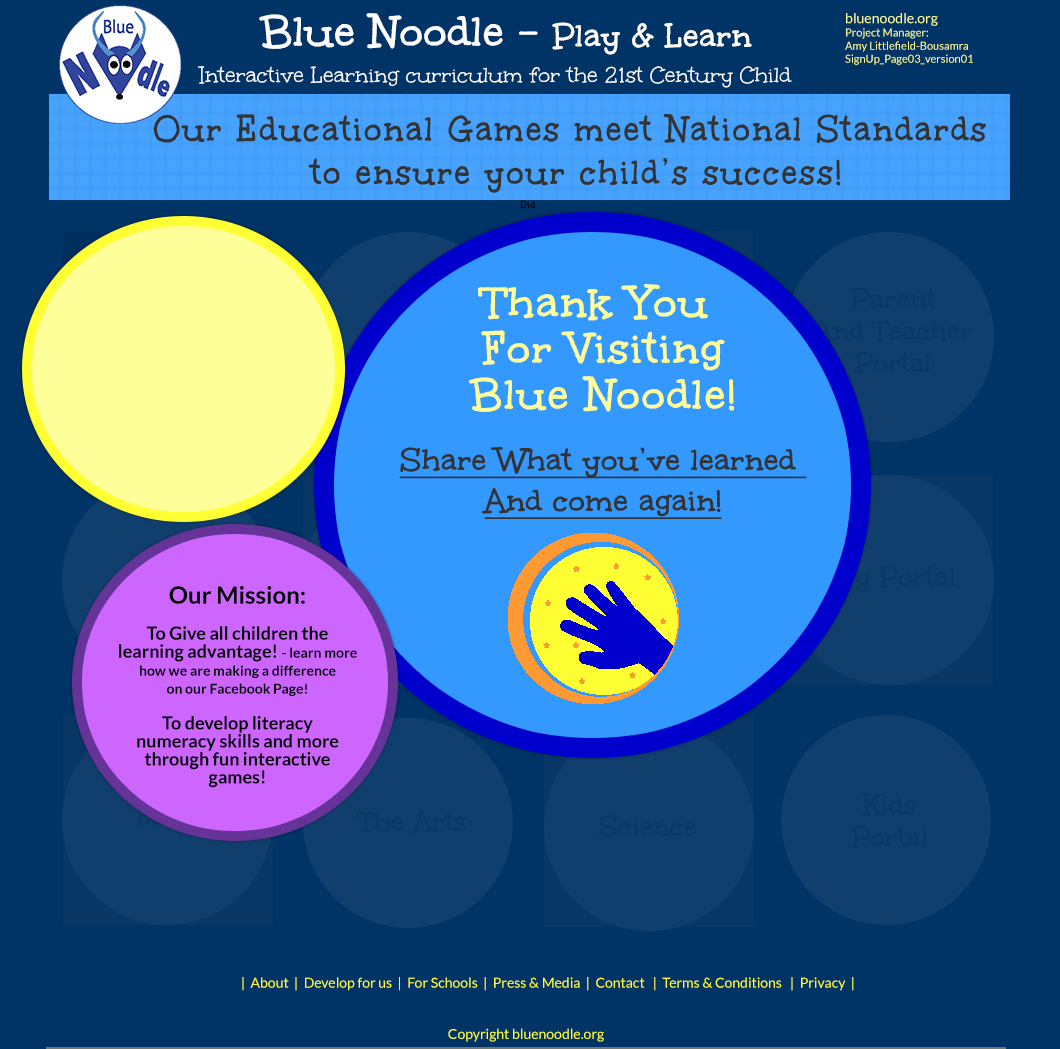
<style>
.page{position:relative;width:1060px;height:1049px;background:#003366}
.page>*{position:absolute;margin:0}
.t1{font:48px "Unkempt-Bold";color:#ffffff}
.t2{font:36px "Unkempt-Bold";color:#ffffff}
.t3{font:11px "Lato-Regular";color:#ffff99}
.t4{font:14px "Lato-Regular";color:#ffff99}
.t5{font:24px "Unkempt";color:#ffffff}
.t6{font:39.6px "Unkempt-Bold";letter-spacing:0.05em;color:#333333;scale:0.91 1}
.t7{font:11.1px "Unkempt-Bold";color:#000000}
.t8{font:48px/46px "Unkempt-Bold";letter-spacing:0.025em;color:#ffff99}
.t9{font:34px "Unkempt-Bold";color:#333333;text-decoration:underline}
.t10{font:18px/18px "Lato-Bold";color:#000000}
.t11{font:18px/20px "Lato-Bold";color:#000000}
.t12{font:24px/18px "Lato-Bold";color:#000000}
.t13{font:14px/18px "Lato-Bold";color:#000000}
.t14{font:30px/32px "Unkempt-Bold";color:#0a3968}
.t15{font:30px "Unkempt-Bold";color:#0a3968}
.t16{font:14px "Lato-Regular";color:#ffff33}
</style>
<div class="page">
<p class="t1" style="left:259px;top:13px;width:493px;height:42px">Blue Noodle - <span class="t2">Play &amp; Learn</span></p>
<p class="t3" style="left:845px;top:13px;width:128px;height:52px"><span class="t4">bluenoodle.org <br></span>Project Manager: <br>Amy Littlefield-Bousamra<br>SignUp_Page03_version01</p>
<p class="t5" style="left:198px;top:66px;width:594px;height:22px">Interactive Learning curriculum for the 21st Century Child</p>
<p class="t6" style="left:153px;top:114px;width:833px;height:79px;text-align:center">Our Educational Games meet National Standards <br>to ensure your child’s success!</p>
<p class="t7" style="left:520px;top:200px;width:16px;height:9px">Did</p>
<p class="t8" style="left:469px;top:283px;width:266px;height:129px;text-align:center">Thank You <br>For Visiting<br>Blue Noodle!</p>
<p class="t9" style="left:399px;top:446px;width:408px;height:73px;text-align:center">Share What you’ve learned <br>And come again!</p>
<p class="t10" style="left:119px;top:586px;width:238px;height:202px;text-align:center"><span class="t11"><br><br></span><span class="t12">Our Mission:<br><br></span>To Give all children the <br>learning advantage! <span class="t13">- learn more<br>how we are making a difference<br>on our Facebook Page!<br></span><br>To develop literacy  <br>numeracy skills and more <br>through fun interactive<br>games!</p>
<p class="t14" style="left:851px;top:793px;width:76px;height:56px;text-align:center">Kids<br>Portal</p>
<p class="t15" style="left:356px;top:810px;width:111px;height:23px">The Arts</p>
<p class="t15" style="left:599px;top:815px;width:97px;height:22px">Science</p>
<p class="t16" style="left:242px;top:977px;width:612px;height:14px">|  About  |  Develop for us  |  For Schools  |  Press &amp; Media  |  Contact   |  Terms &amp; Conditions   |  Privacy  |</p>
<p class="t16" style="left:448px;top:1028px;width:156px;height:14px">Copyright bluenoodle.org</p>
</div>
